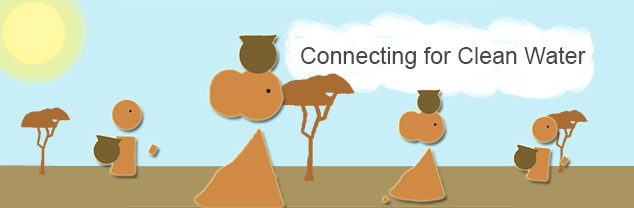
<style>
.page{position:relative;width:634px;height:208px;background:#c8eff8}
.page>*{position:absolute;margin:0}
.t1{font:23.2px "ArialMT";color:#484848}
</style>
<div class="page">
<p class="t1" style="left:301px;top:47px;width:285px;height:22px">Connecting for Clean Water</p>
</div>
